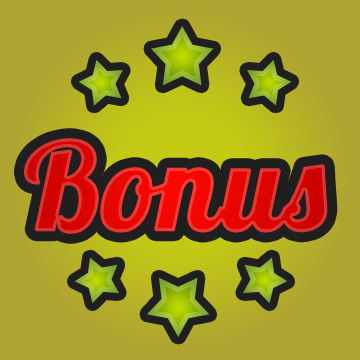
<style>
.page{position:relative;width:360px;height:360px;background:#ada332}
.page>*{position:absolute;margin:0}
.t1{font:120px "Lobster1.4";font-weight:bold}
</style>
<div class="page">
<p class="t1" style="left:24px;top:138px;width:304px;height:96px">Bonus</p>
</div>
